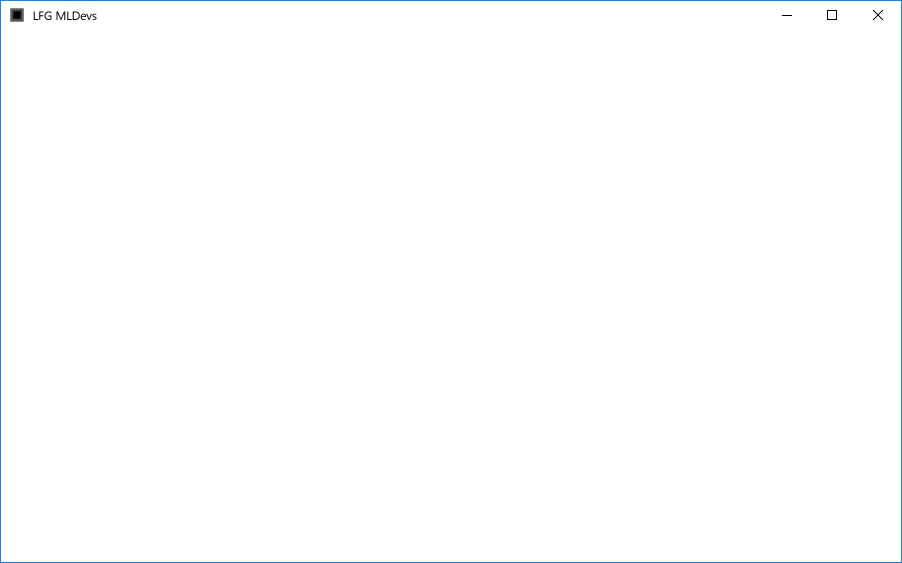
<style>
.page{position:relative;width:902px;height:563px;background:#ffffff}
.page>*{position:absolute;margin:0}
.t1{font:11.9px "SegoeUI";color:#000000}
</style>
<div class="page">
<p class="t1" style="left:33px;top:11px;width:64px;height:9px">LFG MLDevs</p>
</div>
